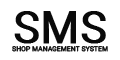
<style>
.page{position:relative;width:120px;height:60px;background:#ffffff}
.page>*{position:absolute;margin:0}
.t1{font:6.7px "Roboto-Regular";color:#0a0a0a;font-weight:bold}
.t2{font:44.2px "Roboto-Regular";color:#0a0a0a;font-weight:bold}
</style>
<div class="page">
<p class="t1" style="left:12px;top:11px;width:96px;height:41px;text-align:center"><span class="t2">SMS<br></span>SHOP MANAGEMENT SYSTEM</p>
</div>
